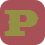
<style>
.page{position:relative;width:45px;height:45px;background:#a75157}
.page>*{position:absolute;margin:0}
.t1{font:50px "Saddlebag-Black";color:#949146}
</style>
<div class="page">
<p class="t1" style="left:4px;top:10px;width:35px;height:26px">P</p>
</div>
